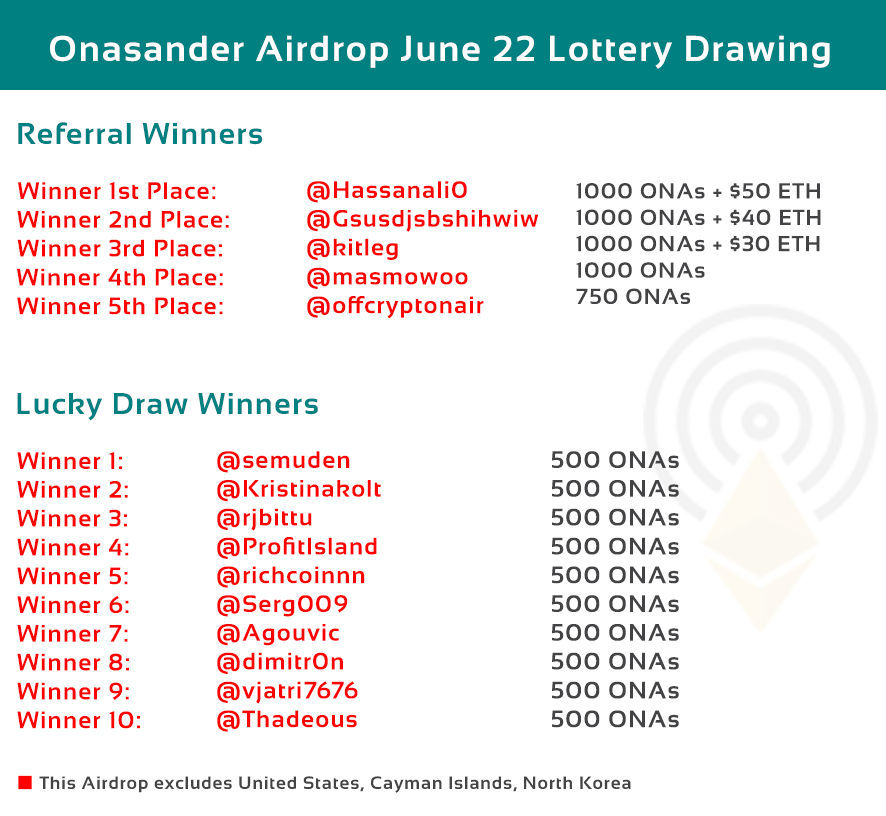
<style>
.page{position:relative;width:886px;height:816px;background:#ffffff}
.page>*{position:absolute;margin:0}
.t1{font:36px "Sansation-Bold";letter-spacing:0.05em;color:#ffffff}
.t2{font:30px "Sansation-Bold";letter-spacing:0.05em;color:#008080}
.t3{font:24px "Sansation-Bold";letter-spacing:0.05em;color:#ff0000}
.t4{font:22px "Sansation-Bold";letter-spacing:0.05em;color:#434244}
.t5{font:24px "Sansation-Bold";letter-spacing:0.05em;color:#434244}
.t6{font:18px "Sansation-Bold";letter-spacing:0.05em;color:#444444}
</style>
<div class="page">
<p class="t1" style="left:50px;top:35px;width:780px;height:34px">Onasander Airdrop June 22 Lottery Drawing</p>
<p class="t2" style="left:18px;top:122px;width:245px;height:23px">Referral Winners</p>
<p class="t3" style="left:17px;top:182px;width:212px;height:133px;text-align:center">Winner 1st Place:<br>  Winner 2nd Place:<br> Winner 3rd Place:<br> Winner 4th Place:<br> Winner 5th Place:</p>
<p class="t3" style="left:307px;top:181px;width:232px;height:138px">@Hassanali0<br>@Gsusdjsbshihwiw<br>@kitleg<br>@masmowoo<br>@offcryptonair</p>
<p class="t4" style="left:576px;top:182px;width:245px;height:122px">1000 ONAs + $50 ETH<br>1000 ONAs + $40 ETH<br>1000 ONAs + $30 ETH<br>1000 ONAs<br>750 ONAs</p>
<p class="t2" style="left:17px;top:393px;width:301px;height:28px">Lucky Draw Winners</p>
<p class="t3" style="left:17px;top:452px;width:123px;height:277px">Winner 1: <br>Winner 2:<br>Winner 3:<br>Winner 4:<br>Winner 5:<br>Winner 6:<br>Winner 7:<br>Winner 8:<br>Winner 9:<br>Winner 10:</p>
<p class="t3" style="left:217px;top:451px;width:164px;height:281px">@semuden<br>@Kristinakolt<br>@rjbittu<br>@ProfitIsland<br>@richcoinnn<br>@Serg009<br>@Agouvic<br>@dimitr0n<br>@vjatri7676<br>@Thadeous</p>
<p class="t5" style="left:552px;top:451px;width:127px;height:277px;text-align:center">500 ONAs<br>500 ONAs<br>500 ONAs<br>500 ONAs<br>500 ONAs<br>500 ONAs<br>500 ONAs<br>500 ONAs<br>500 ONAs<br>500 ONAs</p>
<p class="t6" style="left:39px;top:776px;width:592px;height:17px">This Airdrop excludes United States, Cayman Islands, North Korea</p>
</div>
